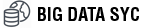
<style>
.page{position:relative;width:149px;height:28px;background:#ffffff}
.page>*{position:absolute;margin:0}
.t1{font:18px "Helvetica-Condensed-Bold";color:#000000}
</style>
<div class="page">
<p class="t1" style="left:38px;top:7px;width:101px;height:14px">BIG DATA SYC</p>
</div>
